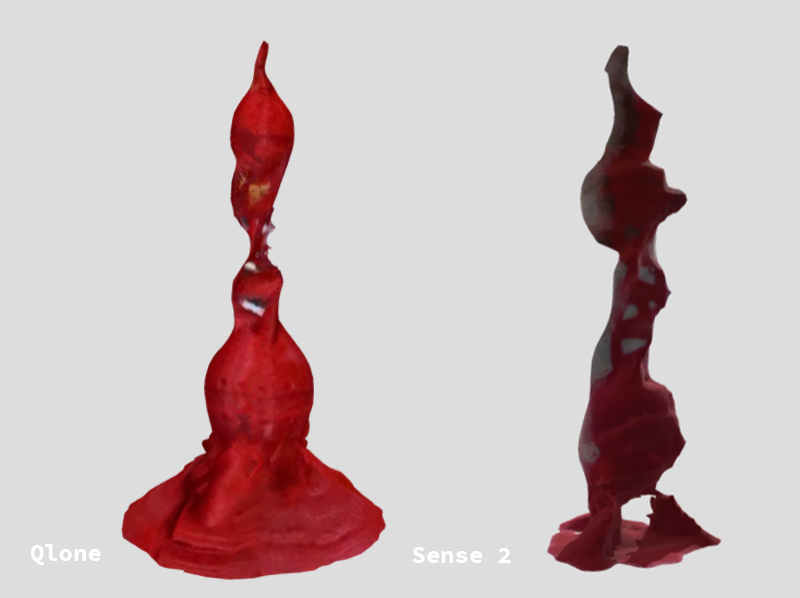
<style>
.page{position:relative;width:800px;height:598px;background:#dddddd}
.page>*{position:absolute;margin:0}
.t1{font:24px "SourceCodePro-Bold";color:#ffffff}
</style>
<div class="page">
<p class="t1" style="left:30px;top:544px;width:71px;height:21px">Qlone</p>
<p class="t1" style="left:412px;top:547px;width:99px;height:16px">Sense 2</p>
</div>
